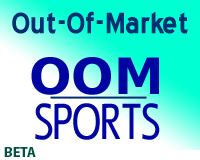
<style>
.page{position:relative;width:200px;height:160px;background:#ffffff}
.page>*{position:absolute;margin:0}
.t1{font:36px "BlueHighway-Bold";color:#002e72}
.t2{font:50px "DejaVuSans-Bold";color:#0004a1}
.t3{font:50px "LigurinoCondensed";color:#0004a1}
.t4{font:14px "Myriad-Bold";color:#005244}
</style>
<div class="page">
<p class="t1" style="left:12px;top:11px;width:176px;height:23px">Out-Of-Market</p>
<p class="t2" style="left:31px;top:57px;width:128px;height:38px">OOM</p>
<p class="t3" style="left:35px;top:103px;width:125px;height:37px">SPORTS</p>
<p class="t4" style="left:4px;top:147px;width:32px;height:10px">BETA</p>
</div>
